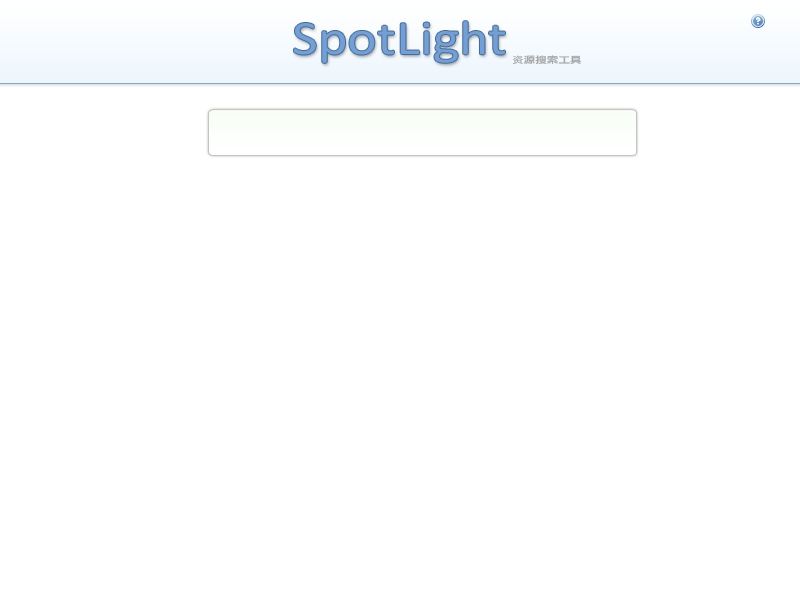
<style>
.page{position:relative;width:800px;height:600px;background:#ffffff}
.page>*{position:absolute;margin:0}
.t1{font:48.2px "Calibri";color:#749fd4;scale:1.17 1}
.t2{font:9px "LiHeiPro";color:#a6a6a6;scale:1.29 1}
.t3{font:9px "STXihei";color:#a6a6a6;scale:1.29 1}
</style>
<div class="page">
<p class="t1" style="left:294px;top:21px;width:211px;height:42px">SpotLight</p>
<p class="t2" style="left:513px;top:55px;width:69px;height:9px"><span class="t3">资</span>源搜索工具</p>
</div>
